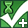
<style>
.page{position:relative;width:28px;height:28px;background:#ffffff}
.page>*{position:absolute;margin:0}
.t1{font:16px "Arial-BoldMT";color:#ffffff}
</style>
<div class="page">
<p class="t1" style="left:19px;top:19px;width:8px;height:8px">+</p>
</div>
